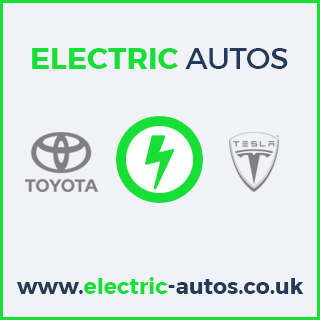
<style>
.page{position:relative;width:320px;height:320px;background:#f1f2f8}
.page>*{position:absolute;margin:0}
.t1{font:30px "Montserrat-Bold";color:#18de38}
.t2{font:30px "Montserrat-Regular";color:#243a5a}
.t3{font:22px "Montserrat-Bold";color:#243a5a}
.t4{font:22px "Montserrat-Bold";color:#18de38}
</style>
<div class="page">
<p class="t1" style="left:32px;top:48px;width:256px;height:21px">ELECTRIC <span class="t2">AUTOS</span></p>
<p class="t3" style="left:16px;top:277px;width:288px;height:17px">www.<span class="t4">electric</span>-autos.co.uk</p>
</div>
